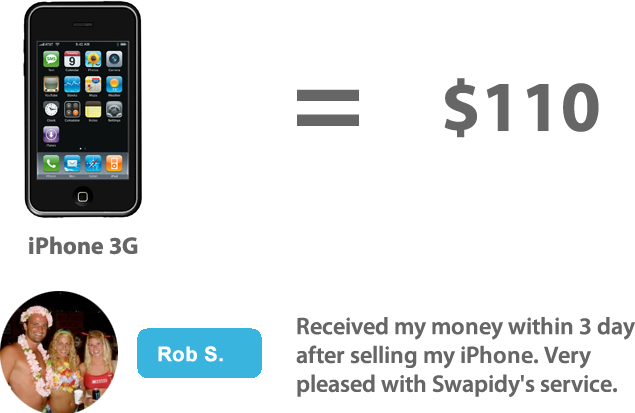
<style>
.page{position:relative;width:635px;height:413px;background:#ffffff}
.page>*{position:absolute;margin:0}
.t1{font:72px "MyriadPro-Bold";color:#666666}
.t2{font:120px "MyriadPro-Bold";color:#666666}
.t3{font:24px "MyriadPro-Bold";color:#666666}
.t4{font:24px "MyriadPro-Semibold";color:#666666}
.t5{font:20px "Arial-BoldMT";color:#ffffff;font-weight:bold}
</style>
<div class="page">
<p class="t1" style="left:444px;top:78px;width:155px;height:60px">$110</p>
<p class="t2" style="left:297px;top:89px;width:62px;height:37px">=</p>
<p class="t3" style="left:29px;top:236px;width:109px;height:19px">iPhone 3G</p>
<p class="t4" style="left:296px;top:317px;width:339px;height:81px">Received my money within 3 days after selling my iPhone. Very pleased with Swapidy's service.</p>
<p class="t5" style="left:158px;top:346px;width:65px;height:16px">Rob S.</p>
</div>
